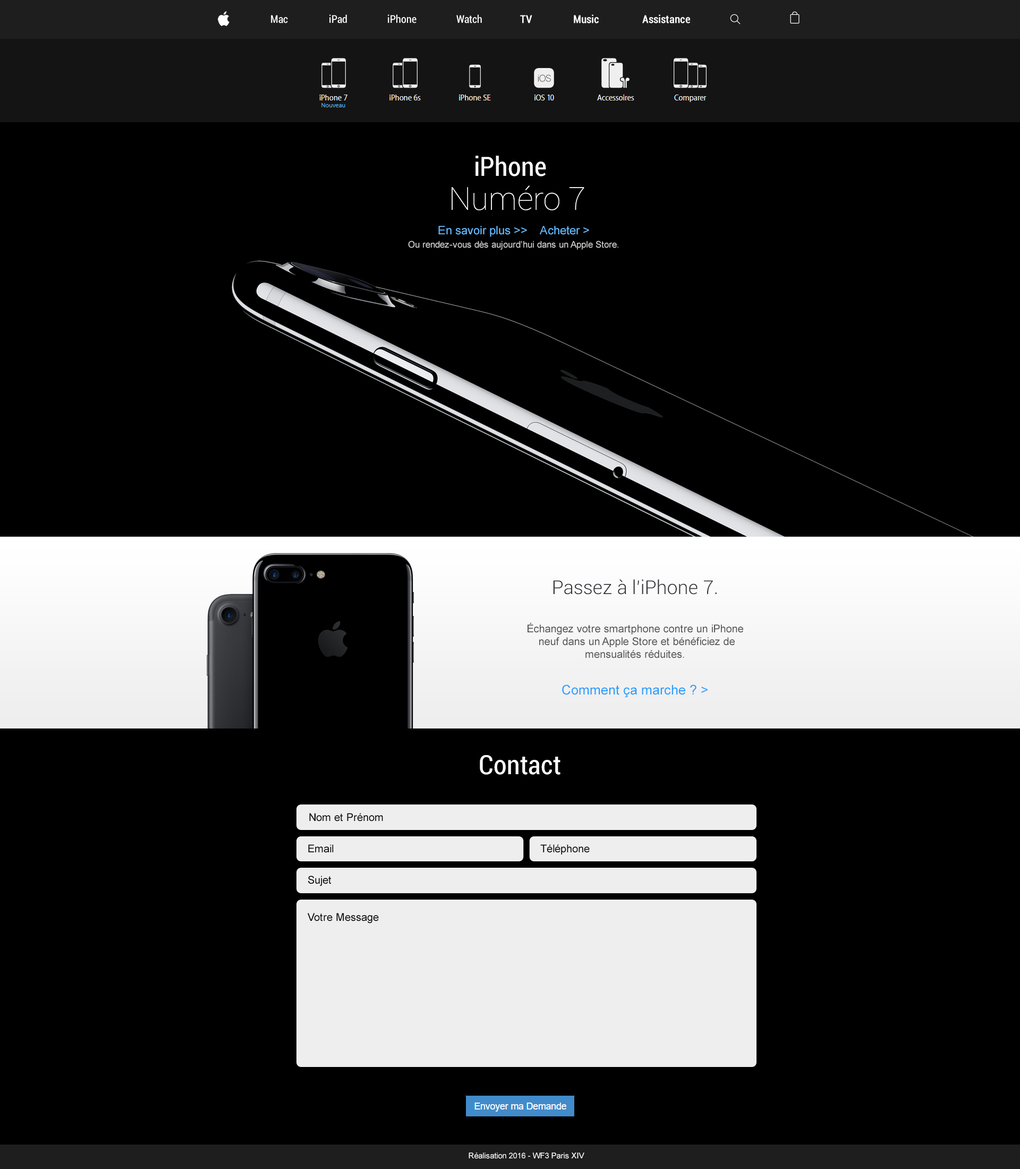
<style>
.page{position:relative;width:1020px;height:1169px;background:#000000}
.page>*{position:absolute;margin:0}
.t1{font:10.6px "Roboto-Condensed";color:#ffffff}
.t2{font:10.6px "Roboto-Condensed";color:#ffffff;font-weight:bold}
.t3{font:26.6px "Roboto-Condensed";color:#ffffff}
.t4{font:31.9px "Roboto-Thin";color:#ffffff}
.t5{font:11.7px "ArialMT";color:#66bbff}
.t6{font:9px "ArialMT";color:#cccccc}
.t7{font:19.1px "Roboto-Light";color:#303236}
.t8{font:10.6px/12.8px "ArialMT";color:#555555}
.t9{font:13.3px "ArialMT";color:#2b9efd}
.t10{font:10.6px "ArialMT";color:#000000}
.t11{font:8px "ArialMT";color:#ffffff}
</style>
<div class="page">
<p class="t1" style="left:271px;top:15px;width:17px;height:8px">Mac</p>
<p class="t1" style="left:329px;top:14px;width:18px;height:9px">iPad</p>
<p class="t1" style="left:388px;top:14px;width:29px;height:9px">iPhone</p>
<p class="t1" style="left:456px;top:14px;width:26px;height:9px">Watch</p>
<p class="t2" style="left:520px;top:15px;width:12px;height:8px">TV</p>
<p class="t2" style="left:574px;top:14px;width:25px;height:9px">Music</p>
<p class="t2" style="left:642px;top:14px;width:48px;height:9px">Assistance</p>
<p class="t3" style="left:476px;top:156px;width:70px;height:20px">iPhone</p>
<p class="t4" style="left:452px;top:185px;width:132px;height:25px">Numéro 7</p>
<p class="t5" style="left:438px;top:226px;width:151px;height:11px">En savoir plus &gt;&gt;    Acheter &gt;</p>
<p class="t6" style="left:408px;top:241px;width:210px;height:9px">Ou rendez‑vous dès aujourd’hui dans un Apple Store.</p>
<p class="t7" style="left:553px;top:579px;width:164px;height:16px">Passez à l’iPhone 7.</p>
<p class="t8" style="left:528px;top:623px;width:215px;height:35px;text-align:center">Échangez votre smartphone contre un iPhone<br> neuf dans un Apple Store et bénéficiez de mensualités réduites.</p>
<p class="t9" style="left:562px;top:684px;width:146px;height:14px">Comment ça marche ? &gt;</p>
<p class="t3" style="left:480px;top:755px;width:81px;height:20px">Contact</p>
<p class="t10" style="left:309px;top:813px;width:74px;height:8px">Nom et Prénom</p>
<p class="t10" style="left:308px;top:844px;width:26px;height:9px">Email</p>
<p class="t10" style="left:540px;top:844px;width:50px;height:10px">Téléphone</p>
<p class="t10" style="left:308px;top:876px;width:24px;height:10px">Sujet</p>
<p class="t10" style="left:307px;top:913px;width:72px;height:10px">Votre Message</p>
<p class="t11" style="left:469px;top:1152px;width:115px;height:7px">Réalisation 2016 - WF3 Paris XIV</p>
</div>
